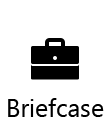
<style>
.page{position:relative;width:110px;height:140px;background:#ffffff}
.page>*{position:absolute;margin:0}
.t1{font:25px "NirmalaUI";color:#000000}
</style>
<div class="page">
<p class="t1" style="left:8px;top:98px;width:96px;height:19px">Briefcase</p>
</div>
